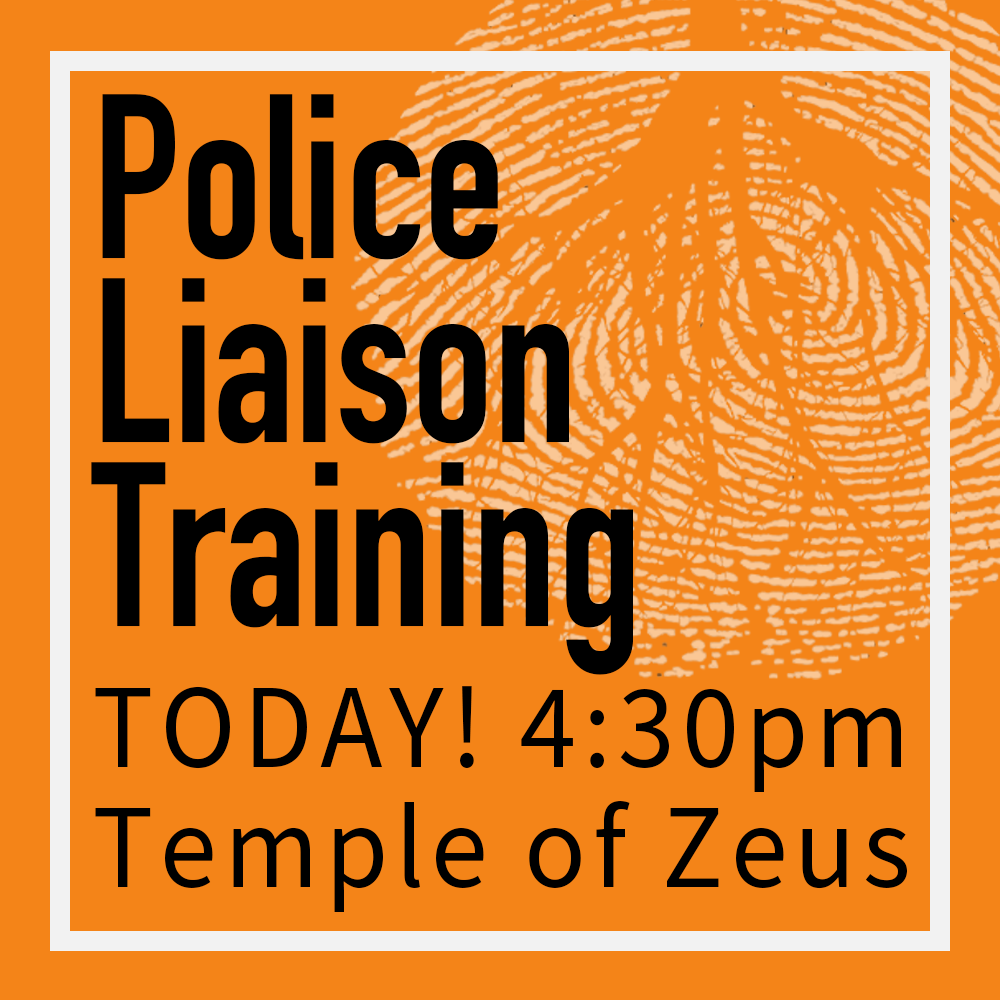
<style>
.page{position:relative;width:1000px;height:1000px;background:#f48418}
.page>*{position:absolute;margin:0}
.t1{font:230px/184px "DINCondensed-Bold";color:#000000;scale:0.95 1}
.t2{font:120px/120px "SourceSansPro-Regular";letter-spacing:0.06em;color:#000000;scale:0.95 1}
</style>
<div class="page">
<p class="t1" style="left:91px;top:94px;width:542px;height:581px">Police<br>Liaison<br>Training</p>
<p class="t2" style="left:95px;top:686px;width:812px;height:226px">TODAY! 4:30pm<br>Temple of Zeus</p>
</div>
